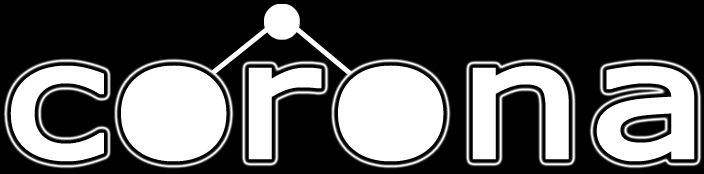
<style>
.page{position:relative;width:704px;height:174px;background:#000000}
.page>*{position:absolute;margin:0}
.t1{font:160px "Verdana";color:#ffffff;font-weight:bold;scale:1.25 1}
</style>
<div class="page">
<p class="t1" style="left:10px;top:65px;width:685px;height:97px">corona</p>
</div>
